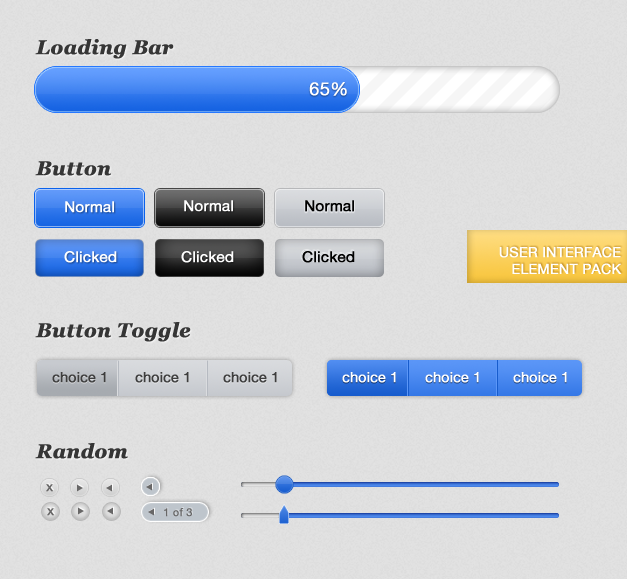
<style>
.page{position:relative;width:627px;height:579px;background:#e1e1e1}
.page>*{position:absolute;margin:0}
.t1{font:20px "Georgia-BoldItalic";color:#363636;font-weight:bold}
.t2{font:18px "HelveticaNeue";color:#ffffff;font-weight:bold}
.t3{font:15px "HelveticaNeue";color:#ffffff;font-weight:bold}
.t4{font:15px "HelveticaNeue";color:#000000;font-weight:bold}
.t5{font:14px "HelveticaNeue";color:#ffffff;font-weight:bold}
.t6{font:14px "HelveticaNeue";color:#3e3e3e;font-weight:bold}
.t7{font:13px "HelveticaNeue";color:#686767;font-weight:bold}
.t8{font:11px "HelveticaNeue";color:#686767;font-weight:bold}
</style>
<div class="page">
<p class="t1" style="left:35px;top:39px;width:139px;height:20px">Loading Bar</p>
<p class="t2" style="left:309px;top:82px;width:38px;height:14px">65%</p>
<p class="t1" style="left:35px;top:161px;width:76px;height:15px">Button</p>
<p class="t3" style="left:65px;top:201px;width:49px;height:12px">Normal</p>
<p class="t3" style="left:184px;top:200px;width:49px;height:12px">Normal</p>
<p class="t4" style="left:305px;top:200px;width:49px;height:12px">Normal</p>
<p class="t5" style="left:499px;top:246px;width:123px;height:29px;text-align:right">USER INTERFACE<br>ELEMENT PACK</p>
<p class="t3" style="left:64px;top:251px;width:53px;height:12px">Clicked</p>
<p class="t3" style="left:181px;top:251px;width:53px;height:12px">Clicked</p>
<p class="t4" style="left:302px;top:251px;width:53px;height:12px">Clicked</p>
<p class="t1" style="left:35px;top:322px;width:156px;height:20px">Button Toggle</p>
<p class="t6" style="left:52px;top:372px;width:54px;height:11px">choice 1</p>
<p class="t6" style="left:135px;top:372px;width:54px;height:11px">choice 1</p>
<p class="t6" style="left:223px;top:372px;width:54px;height:11px">choice 1</p>
<p class="t5" style="left:342px;top:372px;width:54px;height:11px">choice 1</p>
<p class="t5" style="left:425px;top:372px;width:54px;height:11px">choice 1</p>
<p class="t5" style="left:513px;top:372px;width:54px;height:11px">choice 1</p>
<p class="t1" style="left:35px;top:443px;width:93px;height:16px">Random</p>
<p class="t7" style="left:46px;top:484px;width:7px;height:8px">x</p>
<p class="t7" style="left:47px;top:508px;width:7px;height:8px">x</p>
<p class="t8" style="left:164px;top:508px;width:28px;height:9px">1 of 3</p>
</div>
